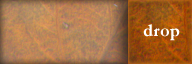
<style>
.page{position:relative;width:192px;height:64px}
.page>*{position:absolute;margin:0}
.t1{font:18.2px "Garamond-Bold";letter-spacing:0.015em;color:#ffffff}
</style>
<div class="page">
<p class="t1" style="left:143px;top:24px;width:37px;height:17px">drop</p>
</div>
